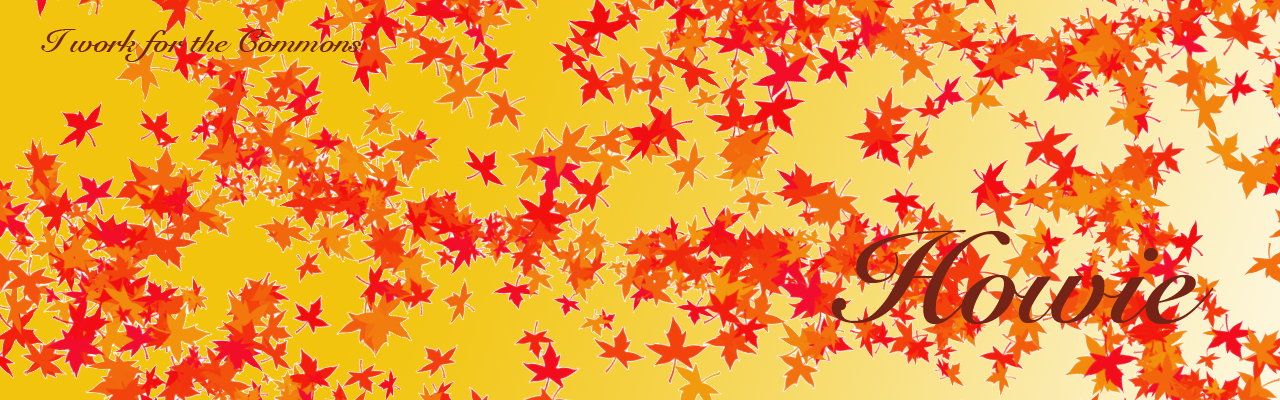
<style>
.page{position:relative;width:1280px;height:400px}
.page>*{position:absolute;margin:0}
.t1{font:32px "SnellRoundhand-Bold";color:#742417}
.t2{font:128px "SnellRoundhand-Bold";color:#742417}
</style>
<div class="page">
<p class="t1" style="left:41px;top:29px;width:325px;height:33px">I work for the Commons</p>
<p class="t2" style="left:831px;top:230px;width:383px;height:94px">Howie</p>
</div>
